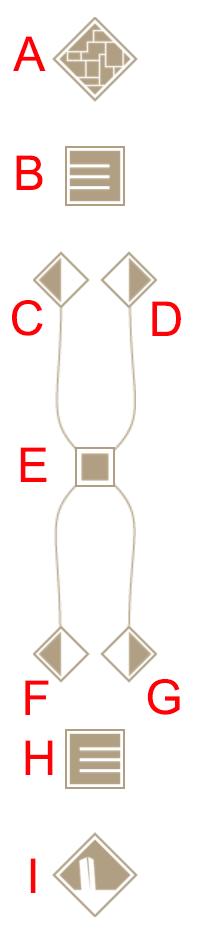
<style>
.page{position:relative;width:200px;height:936px;background:#ffffff}
.page>*{position:absolute;margin:0}
.t1{font:48px "ArialMT";color:#ff0006}
</style>
<div class="page">
<p class="t1" style="left:13px;top:36px;width:33px;height:35px">A</p>
<p class="t1" style="left:16px;top:155px;width:27px;height:35px">B</p>
<p class="t1" style="left:12px;top:300px;width:31px;height:36px">C</p>
<p class="t1" style="left:152px;top:301px;width:29px;height:35px">D</p>
<p class="t1" style="left:20px;top:447px;width:27px;height:35px">E</p>
<p class="t1" style="left:25px;top:680px;width:24px;height:35px">F</p>
<p class="t1" style="left:147px;top:679px;width:33px;height:36px">G</p>
<p class="t1" style="left:25px;top:740px;width:28px;height:35px">H</p>
<p class="t1" style="left:30px;top:858px;width:6px;height:35px">I</p>
</div>
